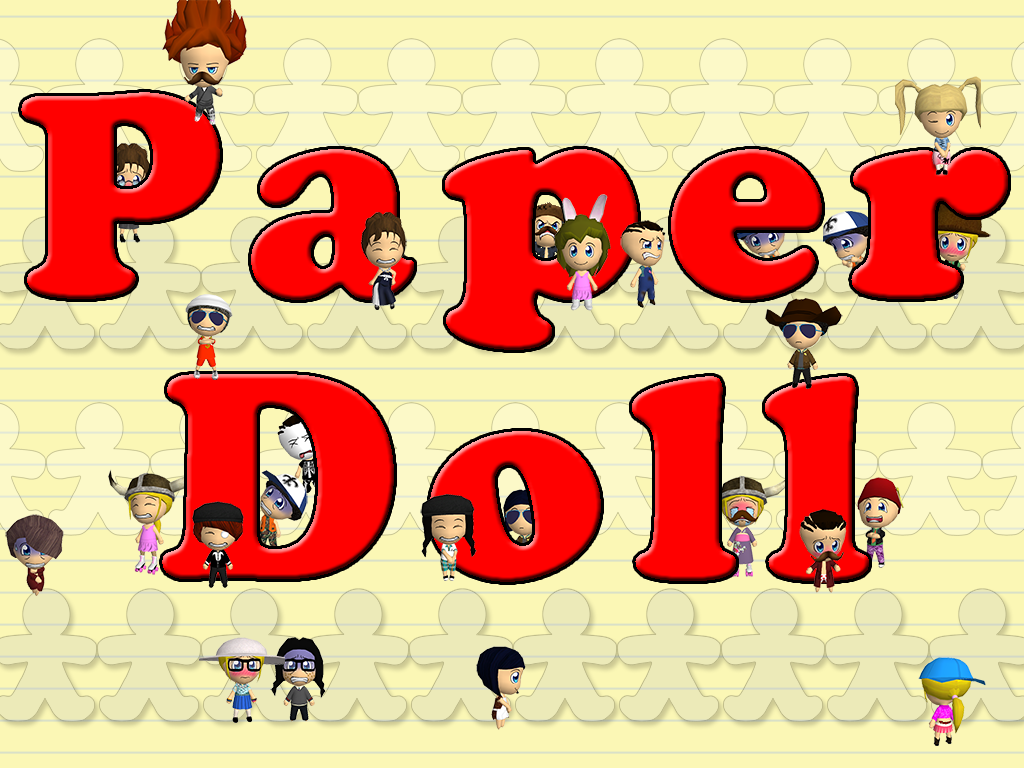
<style>
.page{position:relative;width:1024px;height:768px;background:#fbf7b5}
.page>*{position:absolute;margin:0}
.t1{font:288px "CooperBlackStd";color:#ff0000}
</style>
<div class="page">
<p class="t1" style="left:21px;top:92px;width:987px;height:258px">P a p e r</p>
<p class="t1" style="left:162px;top:374px;width:707px;height:208px">D o l l</p>
</div>
